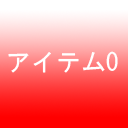
<style>
.page{position:relative;width:128px;height:128px}
.page>*{position:absolute;margin:0}
.t1{font:25px "MS-Gothic";color:#ffffff}
</style>
<div class="page">
<p class="t1" style="left:8px;top:51px;width:110px;height:22px">アイテム0</p>
</div>
